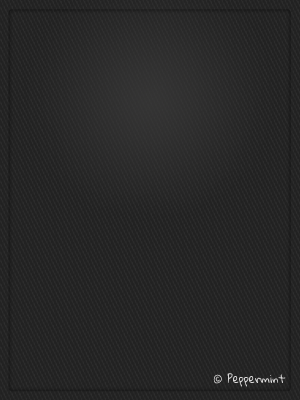
<style>
.page{position:relative;width:300px;height:400px}
.page>*{position:absolute;margin:0}
.t1{font:11px "GloriaHallelujah";color:#d8d7d7}
</style>
<div class="page">
<p class="t1" style="left:213px;top:373px;width:73px;height:14px">© Peppermint</p>
</div>
